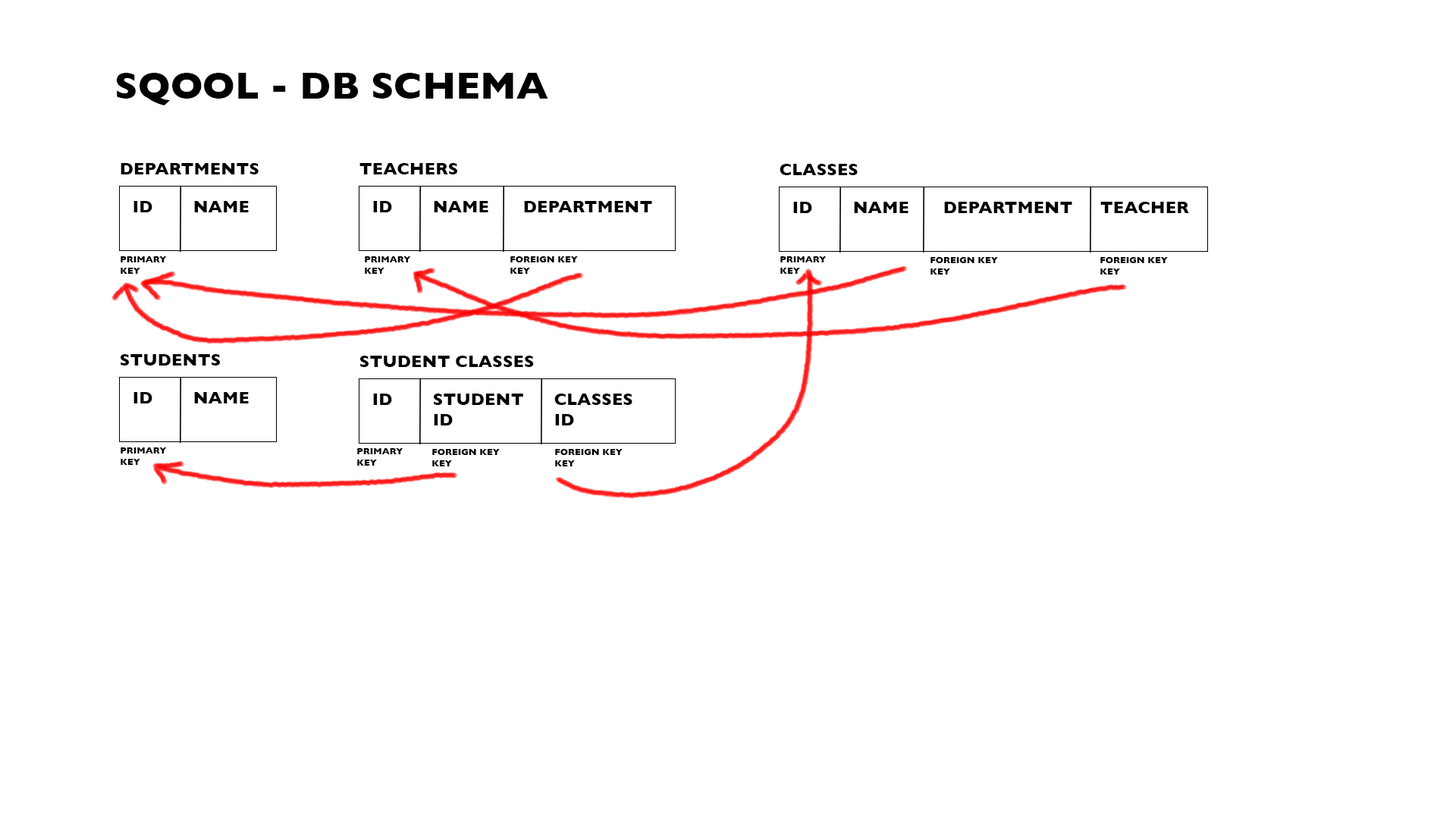
<style>
.page{position:relative;width:1456px;height:819px;background:#ffffff}
.page>*{position:absolute;margin:0}
.t1{font:9.1px "GillSans-Bold";color:#000000}
.t2{font:16.8px "GillSans-Bold";color:#000000}
</style>
<div class="page">
<p class="t1" style="left:116px;top:73px;width:432px;height:32px">SQOOL - DB SCHEMA</p>
<p class="t2" style="left:121px;top:163px;width:138px;height:11px">DEPARTMENTS</p>
<p class="t2" style="left:359px;top:163px;width:98px;height:11px">TEACHERS</p>
<p class="t2" style="left:780px;top:164px;width:78px;height:11px">CLASSES</p>
<p class="t2" style="left:133px;top:201px;width:19px;height:11px">ID</p>
<p class="t2" style="left:194px;top:201px;width:55px;height:11px">NAME</p>
<p class="t2" style="left:373px;top:201px;width:19px;height:11px">ID</p>
<p class="t2" style="left:434px;top:201px;width:54px;height:11px">NAME</p>
<p class="t2" style="left:524px;top:201px;width:128px;height:11px">DEPARTMENT</p>
<p class="t2" style="left:793px;top:202px;width:19px;height:11px">ID</p>
<p class="t2" style="left:854px;top:202px;width:54px;height:11px">NAME</p>
<p class="t2" style="left:944px;top:202px;width:128px;height:11px">DEPARTMENT</p>
<p class="t2" style="left:1100px;top:202px;width:89px;height:11px">TEACHER</p>
<p class="t1" style="left:121px;top:256px;width:46px;height:18px">PRIMARY<br>KEY</p>
<p class="t1" style="left:365px;top:256px;width:46px;height:18px">PRIMARY<br>KEY</p>
<p class="t1" style="left:510px;top:256px;width:68px;height:18px">FOREIGN KEY<br>KEY</p>
<p class="t1" style="left:780px;top:256px;width:47px;height:18px">PRIMARY<br>KEY</p>
<p class="t1" style="left:930px;top:257px;width:68px;height:18px">FOREIGN KEY<br>KEY</p>
<p class="t1" style="left:1100px;top:257px;width:68px;height:18px">FOREIGN KEY<br>KEY</p>
<p class="t2" style="left:121px;top:354px;width:99px;height:12px">STUDENTS</p>
<p class="t2" style="left:360px;top:356px;width:174px;height:11px">STUDENT CLASSES</p>
<p class="t2" style="left:133px;top:392px;width:19px;height:11px">ID</p>
<p class="t2" style="left:194px;top:392px;width:55px;height:11px">NAME</p>
<p class="t2" style="left:373px;top:394px;width:19px;height:11px">ID</p>
<p class="t2" style="left:434px;top:394px;width:89px;height:31px">STUDENT<br>ID</p>
<p class="t2" style="left:554px;top:394px;width:78px;height:31px">CLASSES <br>ID</p>
<p class="t1" style="left:121px;top:447px;width:46px;height:18px">PRIMARY<br>KEY</p>
<p class="t1" style="left:357px;top:448px;width:46px;height:18px">PRIMARY<br>KEY</p>
<p class="t1" style="left:432px;top:449px;width:68px;height:17px">FOREIGN KEY<br>KEY</p>
<p class="t1" style="left:555px;top:449px;width:68px;height:17px">FOREIGN KEY<br>KEY</p>
</div>
